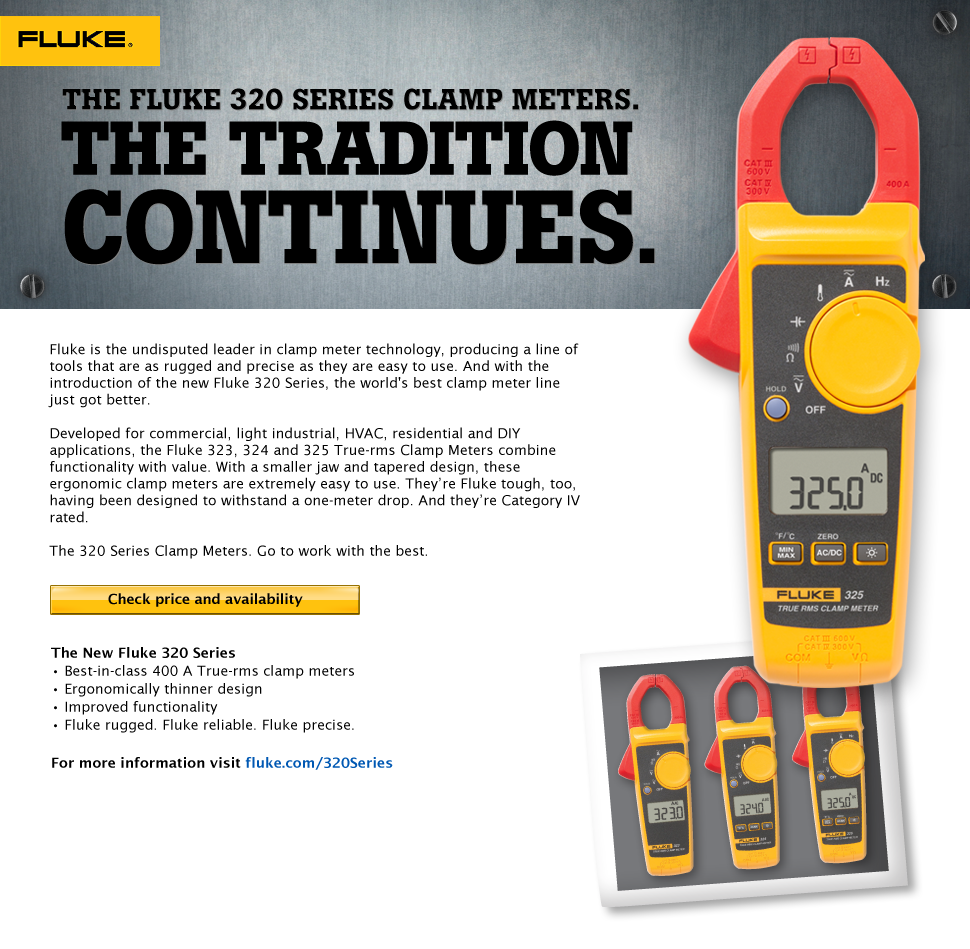
<style>
.page{position:relative;width:970px;height:949px;background:#ffffff}
.page>*{position:absolute;margin:0}
.t1{font:30px "BotonPro-Bold";letter-spacing:-0.01em;color:#000000;text-transform:uppercase}
.t2{font:75.5px "BotonPro-Bold";letter-spacing:-0.01em;color:#000000;text-transform:uppercase}
.t3{font:103.7px "BotonPro-Bold";letter-spacing:-0.01em;color:#000000;text-transform:uppercase}
.t4{font:80px "BotonPro-Bold";letter-spacing:-0.01em;color:#000000;text-transform:uppercase}
.t5{font:14px "LucidaSans";color:#000000}
.t6{font:14px "LucidaSans-Demi";letter-spacing:-0.01em;color:#000000}
.t7{font:14px/18px "LucidaSans";color:#000000}
.t8{font:14px/18px "LucidaSans-Demi";color:#000000}
.t9{font:14px/20px "LucidaSans-Demi";color:#000000}
.t10{font:14px/20px "LucidaSans-Demi";color:#0058b3}
</style>
<div class="page">
<p class="t1" style="left:62px;top:88px;width:577px;height:23px">The Fluke 320 Series Clamp Meters.</p>
<p class="t2" style="left:61px;top:120px;width:572px;height:56px">The Tradition</p>
<p class="t3" style="left:64px;top:189px;width:592px;height:77px">Continues<span class="t4">.</span></p>
<p class="t5" style="left:48px;top:343px;width:532px;height:216px">Fluke is the undisputed leader in clamp meter technology, producing a line of tools that are as rugged and precise as they are easy to use. And with the introduction of the new Fluke 320 Series, the world's best clamp meter line just got better.<br><br>Developed for commercial, light industrial, HVAC, residential and DIY applications, the Fluke 323, 324 and 325 True-rms Clamp Meters combine functionality with value. With a smaller jaw and tapered design, these ergonomic clamp meters are extremely easy to use. They’re Fluke tough, too, having been designed to withstand a one-meter drop. And they’re Category IV rated.<br><br>The 320 Series Clamp Meters. Go to work with the best.</p>
<p class="t6" style="left:108px;top:593px;width:195px;height:14px">Check price and availability</p>
<p class="t7" style="left:51px;top:647px;width:342px;height:123px"><span class="t8">The New Fluke 320 Series<br>• </span>Best-in-class 400 A True-rms clamp meters<br><span class="t8">• </span>Ergonomically thinner design<br><span class="t8">• </span>Improved functionality<br><span class="t8">• </span>Fluke rugged. Fluke reliable. Fluke precise.<br><br><span class="t9">For more information visit </span><span class="t10">fluke.com/320Series</span></p>
</div>
